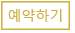
<style>
.page{position:relative;width:75px;height:33px;background:#ffffff}
.page>*{position:absolute;margin:0}
.t1{font:14px "MalgunGothic";color:#ceb042}
</style>
<div class="page">
<p class="t1" style="left:8px;top:9px;width:54px;height:13px">예약하기</p>
</div>
